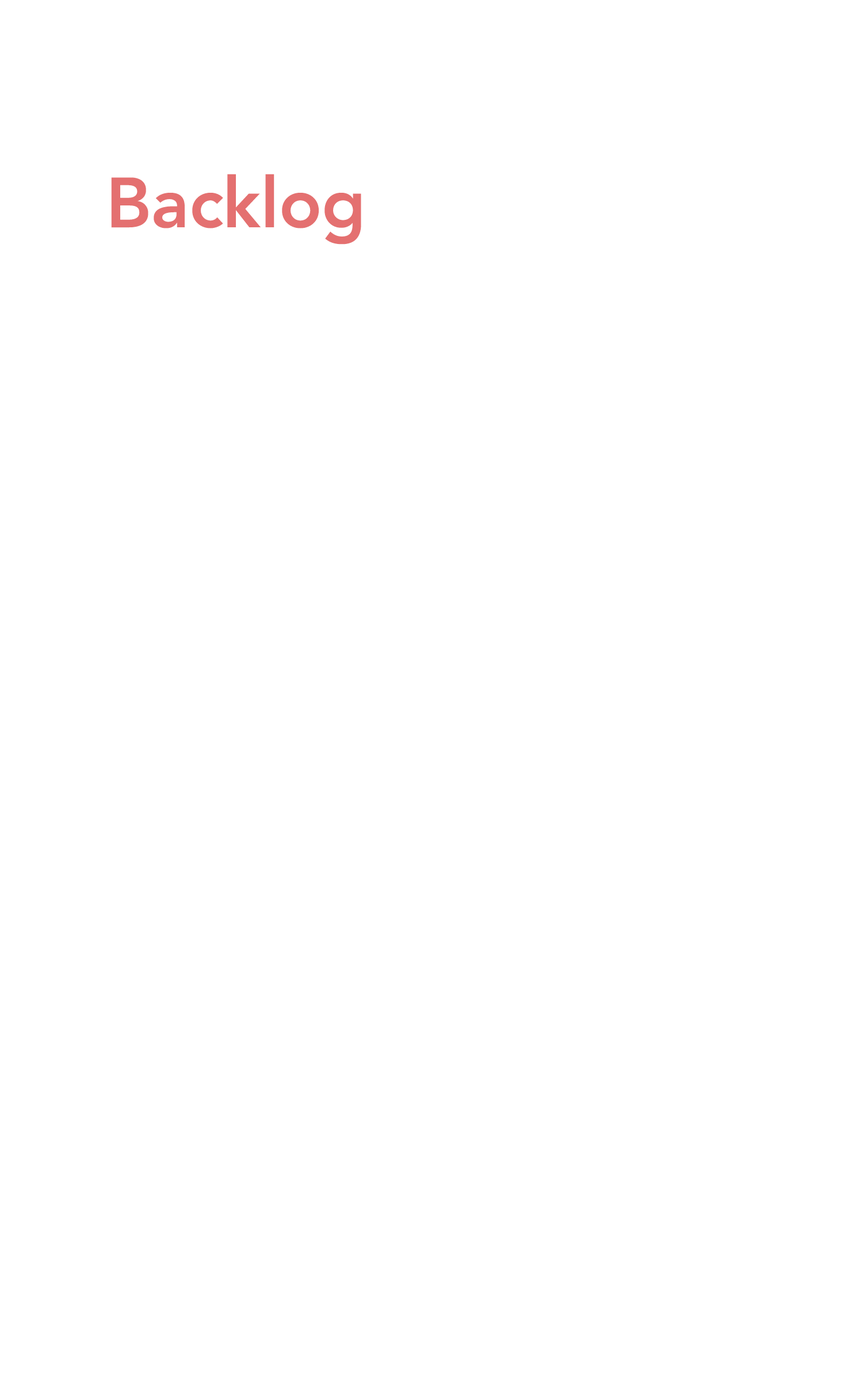
<style>
.page{position:relative;width:863px;height:1381px;background:#ffffff}
.page>*{position:absolute;margin:0}
.t1{font:70.2px "AvenirLTStd-Heavy";color:#e47070}
</style>
<div class="page">
<p class="t1" style="left:111px;top:174px;width:250px;height:71px">Backlog</p>
</div>
